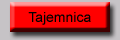
<style>
.page{position:relative;width:120px;height:40px;background:#ff0000}
.page>*{position:absolute;margin:0}
.t1{font:14px "ArialMT";color:#000000}
</style>
<div class="page">
<p class="t1" style="left:28px;top:12px;width:63px;height:13px">Tajemnica</p>
</div>
